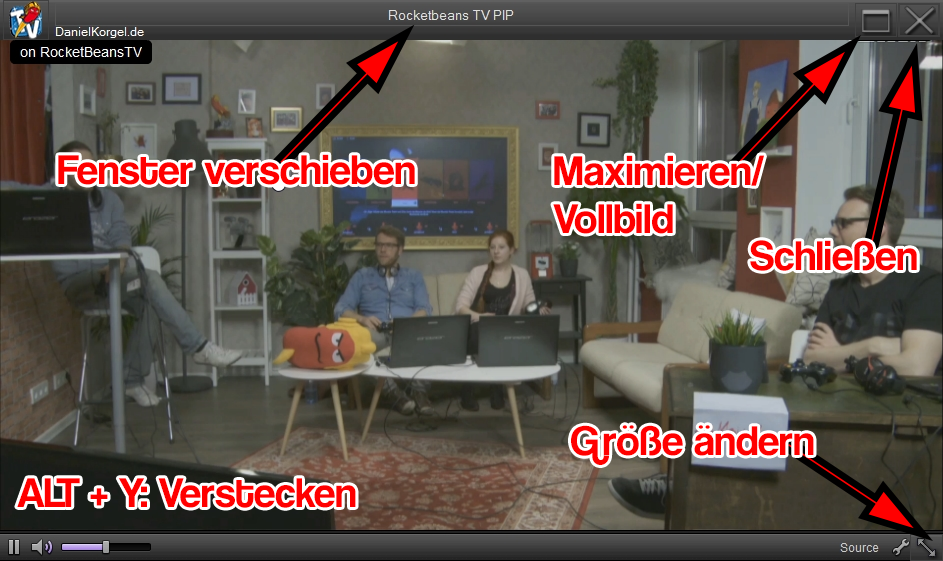
<style>
.page{position:relative;width:943px;height:561px}
.page>*{position:absolute;margin:0}
.t1{font:40px "Coolvetica";color:#ff0000}
</style>
<div class="page">
<p class="t1" style="left:58px;top:154px;width:357px;height:31px">Fenster verschieben</p>
<p class="t1" style="left:553px;top:155px;width:211px;height:79px">Maximieren/<br>Vollbild</p>
<p class="t1" style="left:750px;top:240px;width:167px;height:31px">Schließen</p>
<p class="t1" style="left:571px;top:425px;width:243px;height:40px">Größe ändern</p>
<p class="t1" style="left:17px;top:478px;width:339px;height:30px">ALT + Y: Verstecken</p>
</div>
